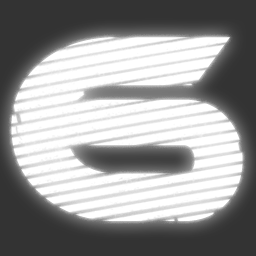
<style>
.page{position:relative;width:256px;height:256px;background:#333333}
.page>*{position:absolute;margin:0}
.t1{font:254.7px "Ethnocentric";letter-spacing:0.05em;color:#ffffff;scale:0.95 1}
</style>
<div class="page">
<p class="t1" style="left:11px;top:37px;width:232px;height:184px">6</p>
</div>
